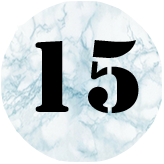
<style>
.page{position:relative;width:164px;height:164px;background:#ffffff}
.page>*{position:absolute;margin:0}
.t1{font:95.5px "StencilStd";color:#000000}
</style>
<div class="page">
<p class="t1" style="left:35px;top:40px;width:104px;height:73px">15</p>
</div>
